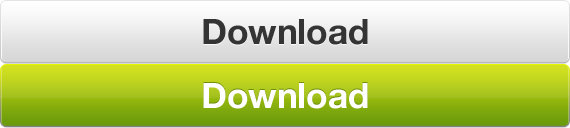
<style>
.page{position:relative;width:570px;height:128px}
.page>*{position:absolute;margin:0}
.t1{font:35px "HelveticaNeue-Bold";color:#343434}
.t2{font:35px "HelveticaNeue-Bold";color:#ffffff}
</style>
<div class="page">
<p class="t1" style="left:203px;top:19px;width:165px;height:26px">Download</p>
<p class="t2" style="left:203px;top:83px;width:165px;height:26px">Download</p>
</div>
